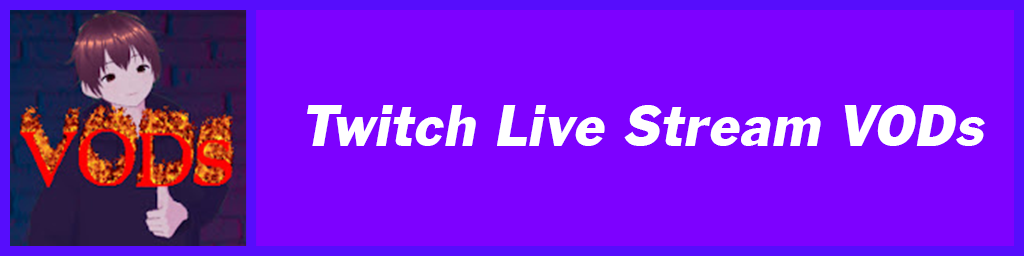
<style>
.page{position:relative;width:1024px;height:256px;background:#7d01ff}
.page>*{position:absolute;margin:0}
.t1{font:61.1px "FranklinGothicITALIC";color:#ffffff}
</style>
<div class="page">
<p class="t1" style="left:307px;top:105px;width:678px;height:41px">Twitch Live Stream VODs</p>
</div>
